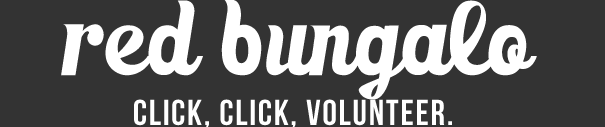
<style>
.page{position:relative;width:605px;height:127px;background:#333333}
.page>*{position:absolute;margin:0}
.t1{font:100px "Marmellata-Jam)_demo";color:#ffffff}
.t2{font:36px "BebasNeue";letter-spacing:0.05em;color:#ffffff}
</style>
<div class="page">
<p class="t1" style="left:61px;top:0px;width:476px;height:100px">red bungalo</p>
<p class="t2" style="left:134px;top:99px;width:318px;height:30px">Click, Click, Volunteer.</p>
</div>
